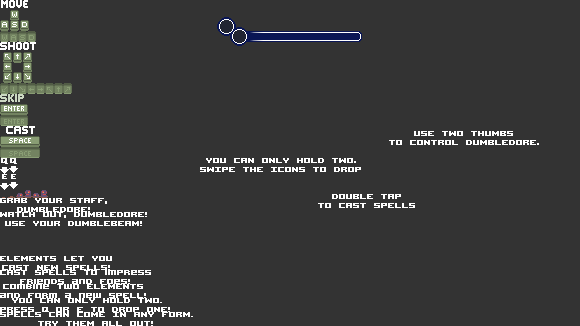
<style>
.page{position:relative;width:580px;height:326px;background:#333333}
.page>*{position:absolute;margin:0}
.t1{font:13px/9px "AcknowledgeTT-BRK-";color:#ffffff}
.t2{font:8px "Acknowledge -BRK-";color:#ffffff}
</style>
<div class="page">
<p class="t1" style="left:389px;top:131px;width:150px;height:14px;text-align:center">USE TWO THUMBS<br>TO CONTROL DUMBLEDORE.</p>
<p class="t1" style="left:200px;top:158px;width:161px;height:14px;text-align:center">YOU CAN ONLY HOLD TWO.<br>SWIPE THE ICONS TO DROP</p>
<p class="t1" style="left:318px;top:194px;width:97px;height:14px;text-align:center">DOUBLE TAP<br>TO CAST SPELLS</p>
<p class="t2" style="left:0px;top:212px;width:147px;height:14px;text-align:center">WATCH OUT, DUMBLEDORE!<br>USE YOUR DUMBLEBEAM!</p>
<p class="t2" style="left:0px;top:256px;width:112px;height:14px;text-align:center">ELEMENTS LET YOU<br>CAST NEW SPELLS!</p>
<p class="t2" style="left:0px;top:270px;width:151px;height:14px;text-align:center">CAST SPELLS to impress<br>friends and foes!</p>
<p class="t2" style="left:0px;top:284px;width:146px;height:14px;text-align:center">combine two ELEMENTS<br>and form a new SPELL!</p>
</div>
